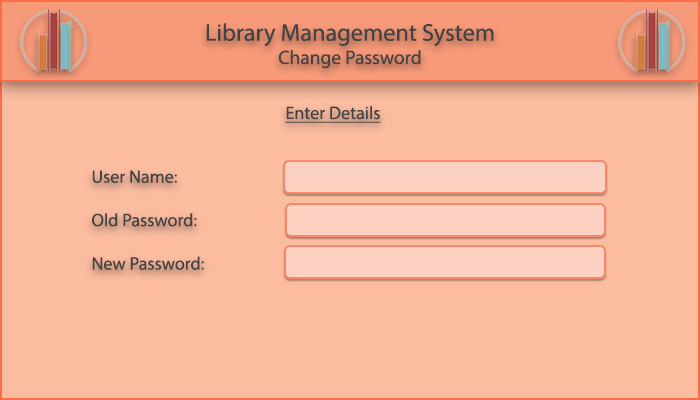
<style>
.page{position:relative;width:700px;height:400px;background:#fbbca0}
.page>*{position:absolute;margin:0}
.t1{font:24.3px "MyriadPro-Regular";color:#444343}
.t2{font:19.4px "MyriadPro-Regular";color:#444343}
.t3{font:18.1px "MyriadPro-Regular";color:#444343;text-decoration:underline}
.t4{font:18.1px "MyriadPro-Regular";color:#444343}
</style>
<div class="page">
<p class="t1" style="left:206px;top:23px;width:288px;height:46px;text-align:center">Library Management System<br><span class="t2">Change Password</span></p>
<p class="t3" style="left:285px;top:106px;width:96px;height:17px">Enter Details</p>
<p class="t4" style="left:92px;top:170px;width:112px;height:100px">User Name: <br><br>Old Password:<br><br>New Password:</p>
</div>
